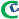
<style>
.page{position:relative;width:19px;height:19px;background:#ffffff}
.page>*{position:absolute;margin:0}
.t1{font:35.9px "MyriadPro-Regular";color:#00a651;scale:1.25 1}
.t2{font:18.7px "Fixedsys";color:#234c86;scale:0.8 1}
</style>
<div class="page">
<p class="t1" style="left:1px;top:0px;width:17px;height:19px">c</p>
<p class="t2" style="left:9px;top:2px;width:11px;height:11px;rotate:-20deg">c</p>
</div>
